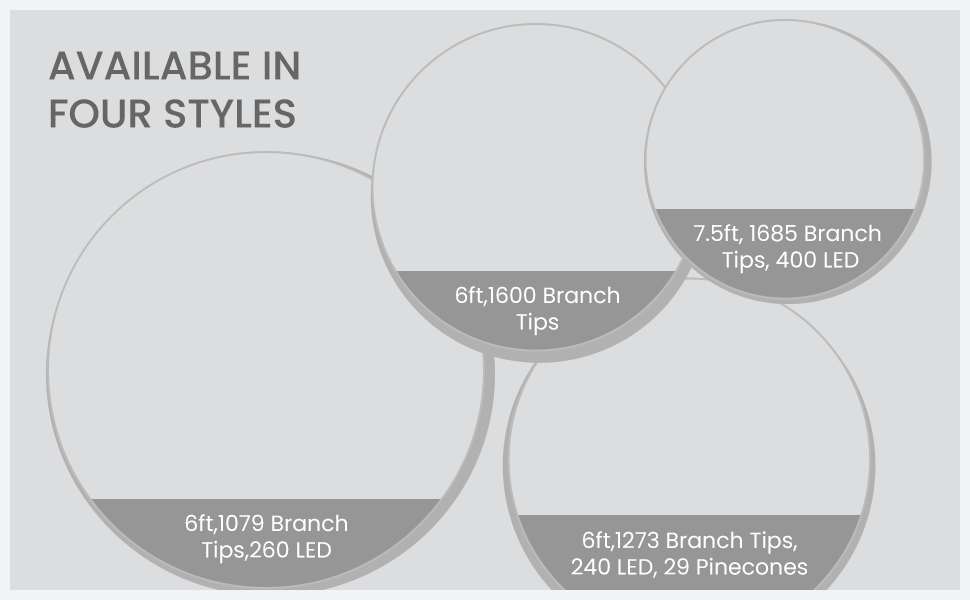
<style>
.page{position:relative;width:970px;height:600px;background:#dcdddf}
.page>*{position:absolute;margin:0}
.t1{font:40px "Poppins-Medium";color:#666666}
.t2{font:22px "Poppins-Regular";color:#ffffff}
</style>
<div class="page">
<p class="t1" style="left:49px;top:51px;width:250px;height:77px">AVAILABLE IN<br>FOUR STYLES</p>
<p class="t2" style="left:694px;top:224px;width:187px;height:50px;text-align:center">7.5ft, 1685 Branch <br>Tips, 400 LED</p>
<p class="t2" style="left:456px;top:286px;width:163px;height:50px;text-align:center">6ft,1600 Branch<br>Tips</p>
<p class="t2" style="left:185px;top:514px;width:162px;height:50px;text-align:center">6ft,1079 Branch<br>Tips,260 LED</p>
<p class="t2" style="left:571px;top:531px;width:236px;height:47px;text-align:center">6ft,1273 Branch Tips,<br>240 LED, 29 Pinecones</p>
</div>
